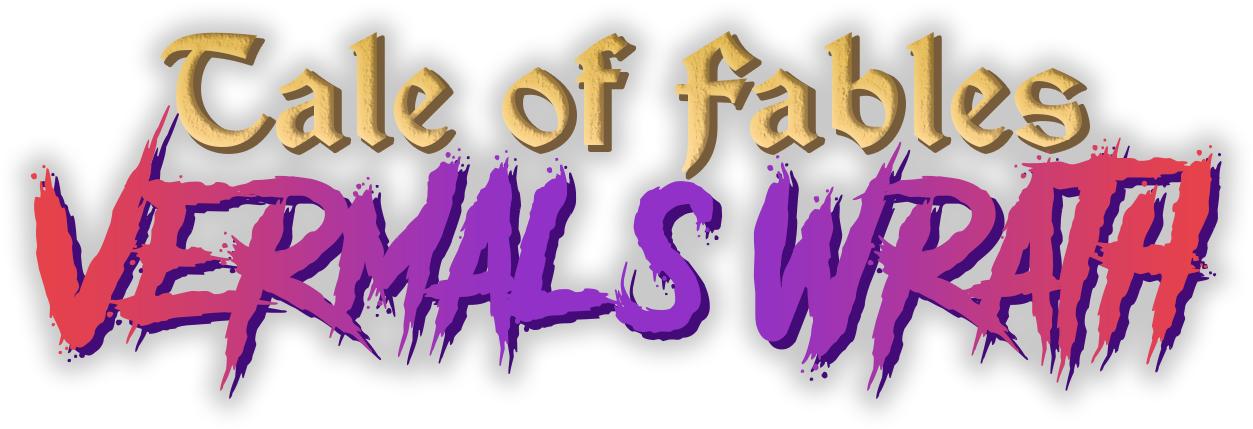
<style>
.page{position:relative;width:1253px;height:429px;background:#ffffff}
.page>*{position:absolute;margin:0}
.t1{font:150px "VinqueRg-Regular"}
.t2{font:180px "AnotherDangerDemo"}
</style>
<div class="page">
<p class="t1" style="left:159px;top:31px;width:923px;height:142px">Tale of Fables</p>
<p class="t2" style="left:31px;top:105px;width:1182px;height:286px">Vermal’s Wrath</p>
</div>
